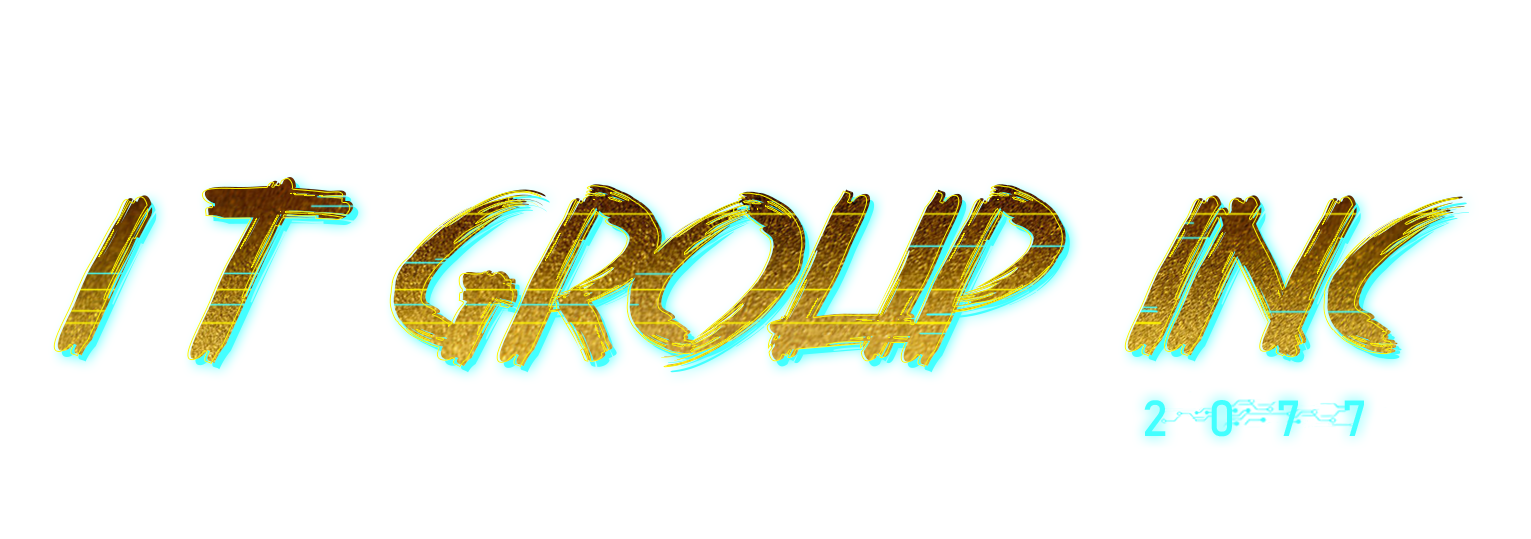
<style>
.page{position:relative;width:1531px;height:539px;background:#ffffff}
.page>*{position:absolute;margin:0}
.t1{font:250px "RaskhalRegular"}
.t2{font:50px "Bahnschrift";color:#43ffff}
</style>
<div class="page">
<p class="t1" style="left:53px;top:178px;width:1408px;height:190px">I T GROUP INC.</p>
<p class="t1" style="left:57px;top:177px;width:1408px;height:190px">I T GROUP INC.</p>
<p class="t1" style="left:61px;top:183px;width:1408px;height:190px">I T GROUP INC.</p>
<p class="t2" style="left:1144px;top:400px;width:220px;height:37px">2   0   7   7</p>
</div>
